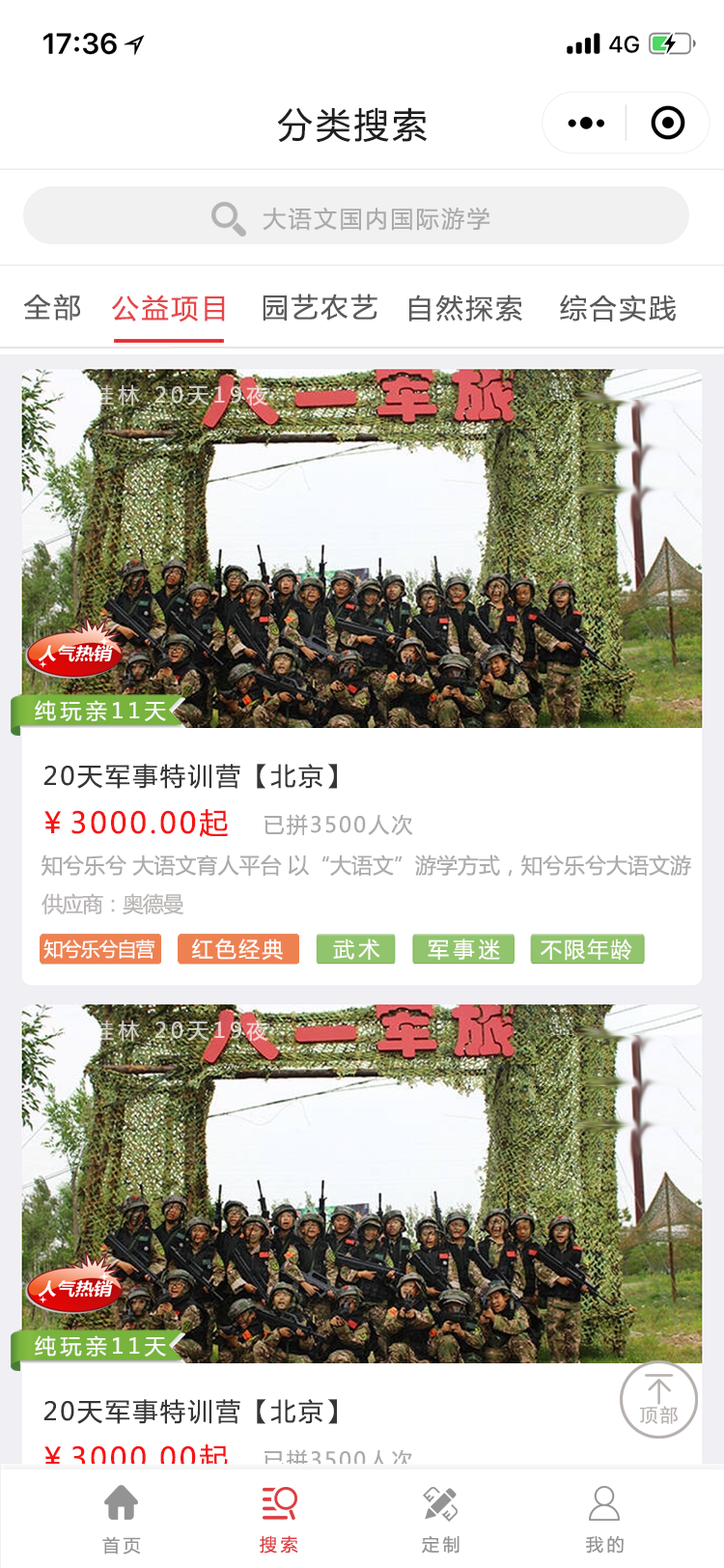
<style>
.page{position:relative;width:724px;height:1568px;background:#ffffff}
.page>*{position:absolute;margin:0}
.t1{font:34.8px "MicrosoftYaHei";letter-spacing:0.1em;color:#201f20}
.t2{font:23.2px "MicrosoftYaHei";letter-spacing:0.1em;color:#abaaaa}
.t3{font:27px "MicrosoftYaHei";letter-spacing:0.1em;color:#5b5a5a}
.t4{font:27px "MicrosoftYaHei";letter-spacing:0.1em;color:#e74749}
.t5{font:21.2px "MicrosoftYaHei";letter-spacing:0.2em;color:#d4d0ca}
.t6{font:21.2px "MicrosoftYaHei";letter-spacing:0.2em;color:#fcfaf9}
.t7{font:25.1px "MicrosoftYaHei";letter-spacing:0.1em;color:#373636}
.t8{font:29px "MicrosoftYaHei";letter-spacing:0.1em;color:#f71414}
.t9{font:21.2px "MicrosoftYaHei";letter-spacing:0.1em;color:#adaaaa}
.t10{font:21.2px "MicrosoftYaHei";color:#adaaaa}
.t11{font:21.2px "MicrosoftYaHei";letter-spacing:-0.05em;color:#b9b6b5}
.t12{font:19.3px "MicrosoftYaHei";letter-spacing:-0.05em;color:#fdfcfb}
.t13{font:21.2px "MicrosoftYaHei";letter-spacing:0.1em;color:#fdfcfb}
.t14{font:21.2px "MicrosoftYaHei";letter-spacing:0.2em;color:#fdfcfb}
.t15{font:17.4px "MicrosoftYaHei";letter-spacing:0.2em;color:#949393}
.t16{font:17.4px "MicrosoftYaHei";letter-spacing:0.2em;color:#db3e41}
</style>
<div class="page">
<p class="t1" style="left:277px;top:107px;width:150px;height:36px">分类搜索</p>
<p class="t2" style="left:263px;top:207px;width:227px;height:24px">大语文国内国际游学</p>
<p class="t3" style="left:23px;top:294px;width:57px;height:27px">全部</p>
<p class="t3" style="left:263px;top:294px;width:115px;height:27px">园艺农艺</p>
<p class="t4" style="left:112px;top:294px;width:113px;height:28px">公益项目</p>
<p class="t3" style="left:409px;top:294px;width:113px;height:28px">自然探索</p>
<p class="t3" style="left:560px;top:294px;width:116px;height:28px">综合实践</p>
<p class="t5" style="left:93px;top:384px;width:175px;height:22px">桂林 20天19夜</p>
<p class="t6" style="left:35px;top:700px;width:131px;height:21px">纯玩亲11天</p>
<p class="t7" style="left:43px;top:764px;width:294px;height:25px">20天军事特训营【北京】</p>
<p class="t8" style="left:44px;top:809px;width:184px;height:28px">￥3000.00起</p>
<p class="t9" style="left:265px;top:814px;width:148px;height:22px">已拼3500人次</p>
<p class="t10" style="left:42px;top:854px;width:649px;height:23px">知兮乐兮 大语文育人平台 以“大语文”游学方式，知兮乐兮大语文游</p>
<p class="t11" style="left:42px;top:893px;width:141px;height:22px">供应商：奥德曼</p>
<p class="t12" style="left:43px;top:939px;width:112px;height:20px">知兮乐兮自营</p>
<p class="t13" style="left:192px;top:938px;width:91px;height:22px">红色经典</p>
<p class="t14" style="left:333px;top:938px;width:47px;height:22px">武术</p>
<p class="t14" style="left:428px;top:938px;width:72px;height:22px">军事迷</p>
<p class="t13" style="left:541px;top:938px;width:91px;height:23px">不限年龄</p>
<p class="t15" style="left:102px;top:1536px;width:39px;height:18px">首页</p>
<p class="t16" style="left:260px;top:1535px;width:38px;height:19px">搜索</p>
<p class="t15" style="left:422px;top:1535px;width:38px;height:19px">定制</p>
<p class="t15" style="left:586px;top:1536px;width:38px;height:18px">我的</p>
</div>
